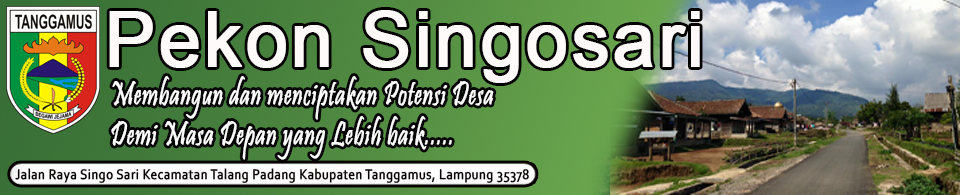
<style>
.page{position:relative;width:960px;height:195px}
.page>*{position:absolute;margin:0}
.t1{font:75.8px "ArialMT";letter-spacing:0.025em;color:#ffffff;font-weight:bold}
.t2{font:33.8px "Pristina-Regular";letter-spacing:0.025em;color:#ffffff;font-weight:bold;scale:0.7 1}
.t3{font:14.8px "Corbel";letter-spacing:0.025em;color:#050000;font-weight:bold;scale:0.86 1}
</style>
<div class="page">
<p class="t1" style="left:109px;top:10px;width:591px;height:73px">Pekon Singosari</p>
<p class="t2" style="left:111px;top:76px;width:383px;height:84px">Membangun dan menciptakan Potensi Desa<br>Demi Masa Depan yang Lebih baik.....</p>
<p class="t3" style="left:15px;top:168px;width:514px;height:15px">Jalan Raya Singo Sari Kecamatan Talang Padang Kabupaten Tanggamus, Lampung 35378</p>
</div>
